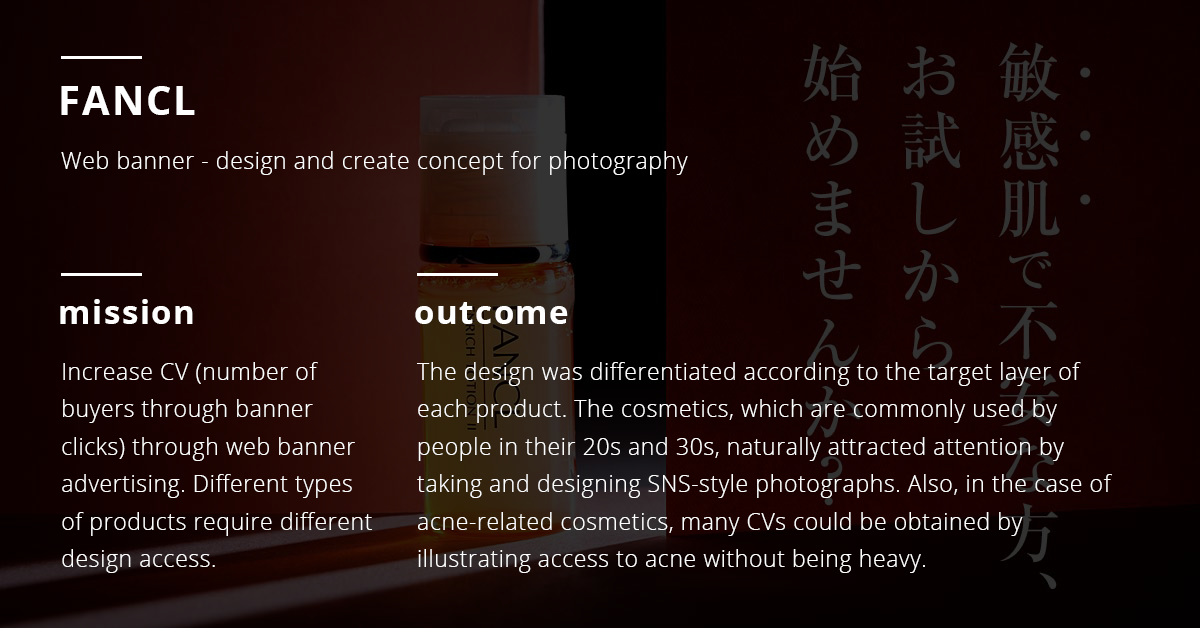
<style>
.page{position:relative;width:1200px;height:628px}
.page>*{position:absolute;margin:0}
.t1{font:40.4px "OpenSans-Bold";letter-spacing:0.04em;color:#fefefe}
.t2{font:23.3px "OpenSans-Light";letter-spacing:0.02em;color:#fefefe}
.t3{font:33.3px "OpenSans-Bold";letter-spacing:0.04em;color:#fefefe}
.t4{font:23.3px/37.5px "OpenSans-Light";letter-spacing:0.02em;color:#fefefe}
</style>
<div class="page">
<p class="t1" style="left:61px;top:86px;width:134px;height:29px">FANCL</p>
<p class="t2" style="left:61px;top:151px;width:627px;height:24px">Web banner - design and create concept for photography</p>
<p class="t3" style="left:60px;top:299px;width:133px;height:25px">mission</p>
<p class="t3" style="left:415px;top:302px;width:153px;height:22px">outcome</p>
<p class="t4" style="left:62px;top:362px;width:310px;height:211px">Increase CV (number of buyers through banner clicks) through web banner advertising. Different types of products require different design access.</p>
<p class="t4" style="left:417px;top:362px;width:695px;height:211px">The design was differentiated according to the target layer of each product. The cosmetics, which are commonly used by people in their 20s and 30s, naturally attracted attention by taking and designing SNS-style photographs. Also, in the case of acne-related cosmetics, many CVs could be obtained by illustrating access to acne without being heavy.</p>
</div>
